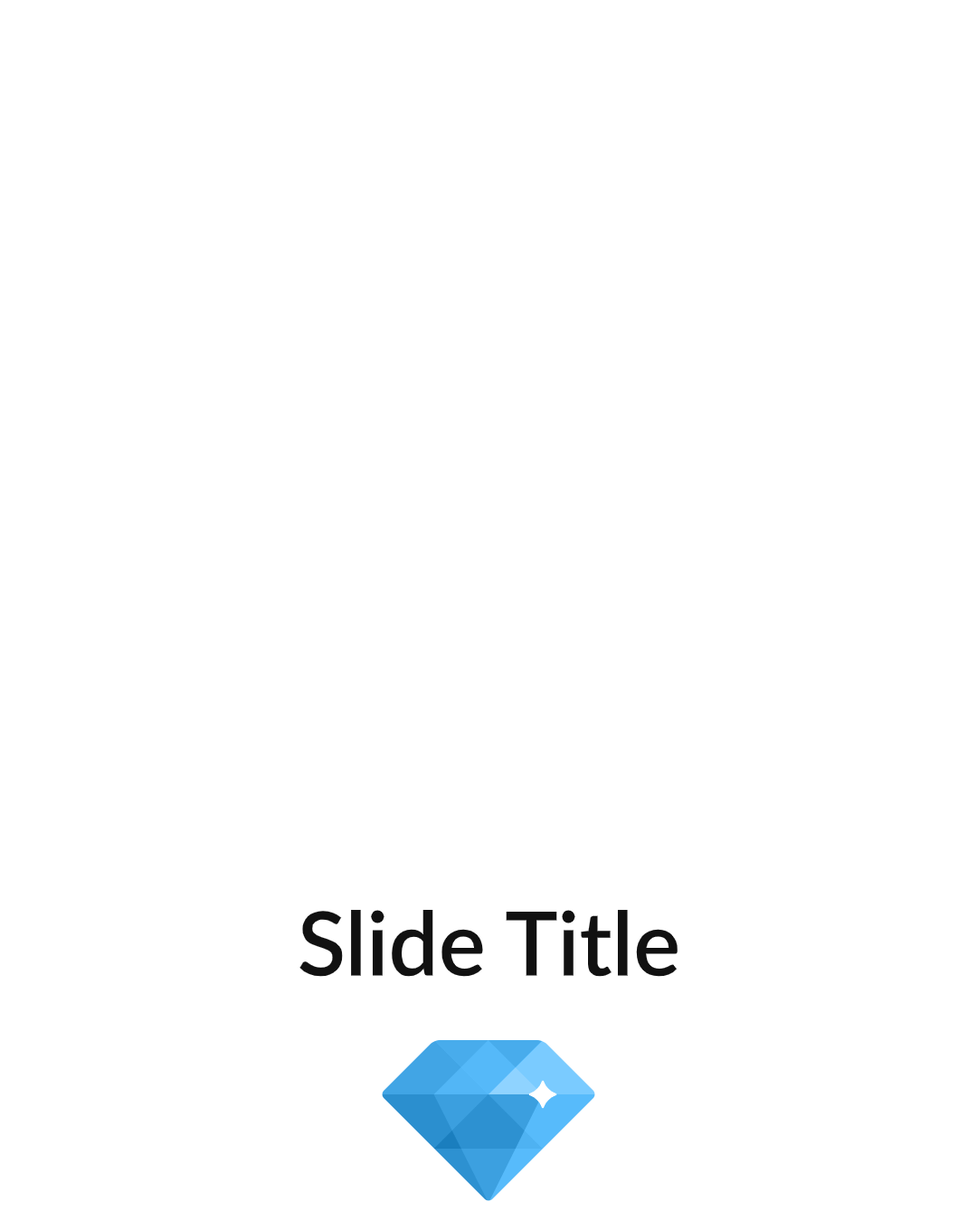
<style>
.page{position:relative;width:977px;height:1221px;background:#ffffff}
.page>*{position:absolute;margin:0}
.t1{font:88.6px "Lato-Semibold";color:#111111}
</style>
<div class="page">
<p class="t1" style="left:299px;top:910px;width:378px;height:67px">Slide Title</p>
</div>
